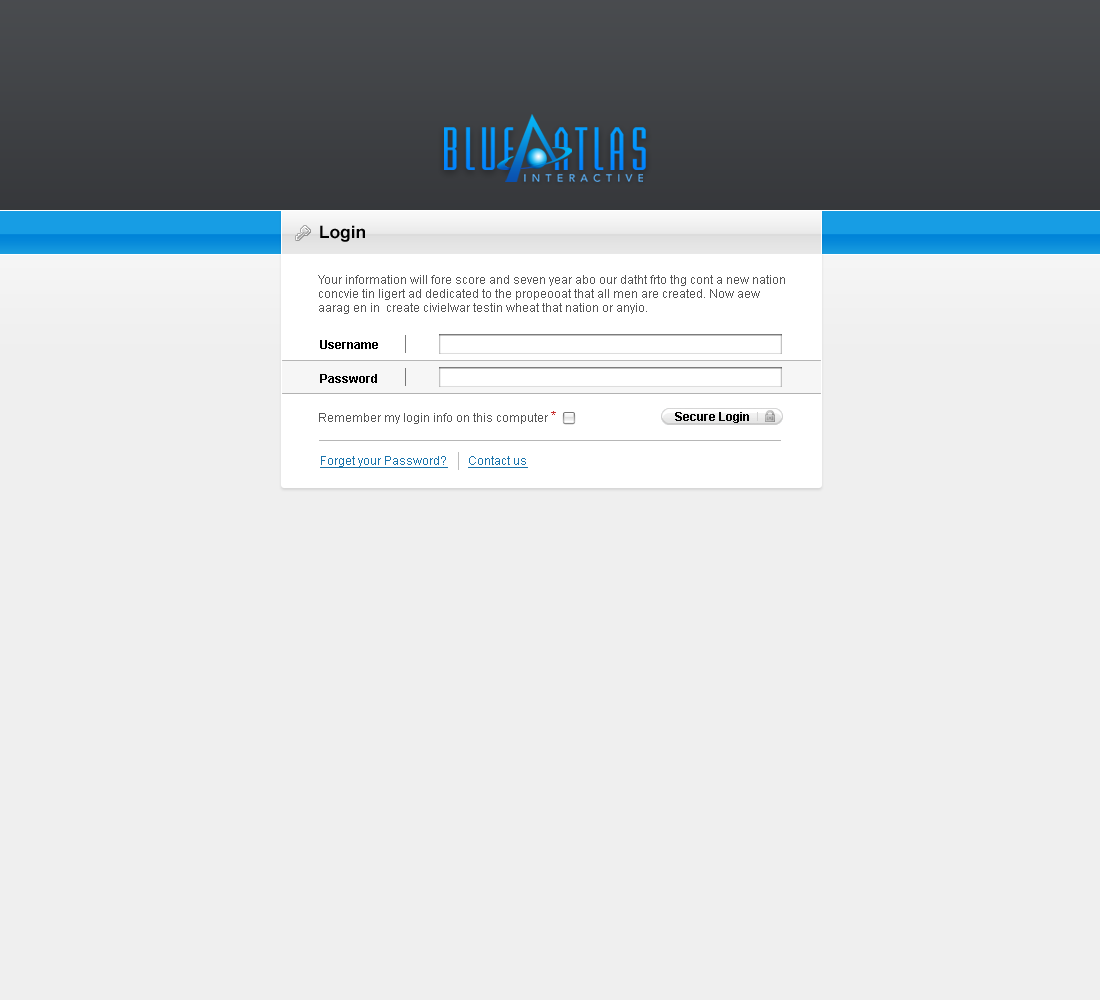
<style>
.page{position:relative;width:1100px;height:1000px;background:#efefef}
.page>*{position:absolute;margin:0}
.t1{font:17px "Arial-BoldMT";letter-spacing:0.01em;color:#000000}
.t2{font:12px/14px "ArialMT";color:#555555}
.t3{font:12px "Arial-BoldMT";color:#000000}
.t4{font:12px "ArialMT";color:#555555}
.t5{font:12px "ArialMT";color:#c21919}
.t6{font:12px "Arial-BoldMT";color:#010101}
.t7{font:12px "ArialMT";color:#1973ab;text-decoration:underline}
</style>
<div class="page">
<p class="t1" style="left:320px;top:225px;width:45px;height:17px">Login</p>
<p class="t2" style="left:318px;top:275px;width:467px;height:39px">Your information will fore score and seven year abo our datht frto thg cont a new nation concvie tin ligert ad dedicated to the propeooat that all men are created. Now aew aarag en in  create civielwar testin wheat that nation or anyio.</p>
<p class="t3" style="left:320px;top:340px;width:58px;height:9px">Username</p>
<p class="t3" style="left:320px;top:374px;width:57px;height:9px">Password</p>
<p class="t4" style="left:319px;top:413px;width:229px;height:11px">Remember my login info on this computer</p>
<p class="t5" style="left:551px;top:411px;width:5px;height:4px;opacity:0.9">*</p>
<p class="t6" style="left:675px;top:412px;width:74px;height:11px">Secure Login</p>
<p class="t7" style="left:320px;top:456px;width:208px;height:12px">Forget your Password?       Contact us</p>
</div>
